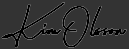
<style>
.page{position:relative;width:129px;height:49px;background:#333333}
.page>*{position:absolute;margin:0}
.t1{font:42.3px "KatherineFree";color:#000000;font-weight:bold}
</style>
<div class="page">
<p class="t1" style="left:1px;top:2px;width:126px;height:46px">KimOlsson</p>
<p class="t1" style="left:1px;top:2px;width:126px;height:46px">KimOlsson</p>
</div>
